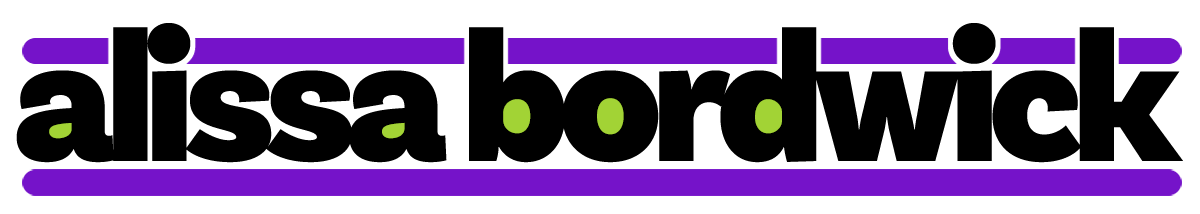
<style>
.page{position:relative;width:1200px;height:214px;background:#ffffff}
.page>*{position:absolute;margin:0}
.t1{font:189.2px "BasicSans-Black";letter-spacing:-0.06em;color:#000000}
</style>
<div class="page">
<p class="t1" style="left:16px;top:23px;width:1167px;height:140px">alissa bordwick</p>
</div>
